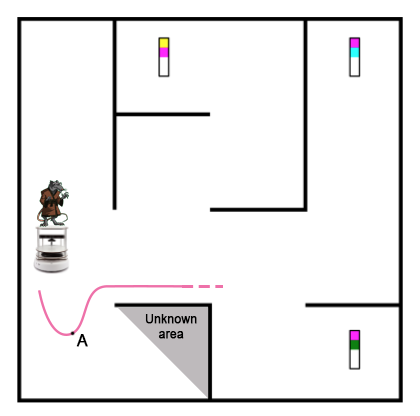
<style>
.page{position:relative;width:420px;height:416px;background:#ffffff}
.page>*{position:absolute;margin:0}
.t1{font:12px "ArialMT";color:#000000;font-weight:bold}
.t2{font:16px "ArialMT";color:#000000;font-weight:bold}
</style>
<div class="page">
<p class="t1" style="left:145px;top:314px;width:52px;height:25px;text-align:center">Unknown <br>area</p>
<p class="t2" style="left:76px;top:334px;width:12px;height:13px">A</p>
</div>
